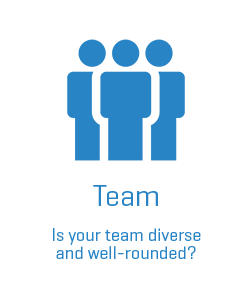
<style>
.page{position:relative;width:250px;height:300px;background:#ffffff}
.page>*{position:absolute;margin:0}
.t1{font:30px "Geogrotesque-Regular";color:#2884c5}
.t2{font:18px/18px "Geogrotesque-Regular";color:#2884c5}
</style>
<div class="page">
<p class="t1" style="left:93px;top:185px;width:65px;height:21px">Team</p>
<p class="t2" style="left:53px;top:228px;width:148px;height:31px;text-align:center">Is your team diverse and well-rounded?</p>
</div>
